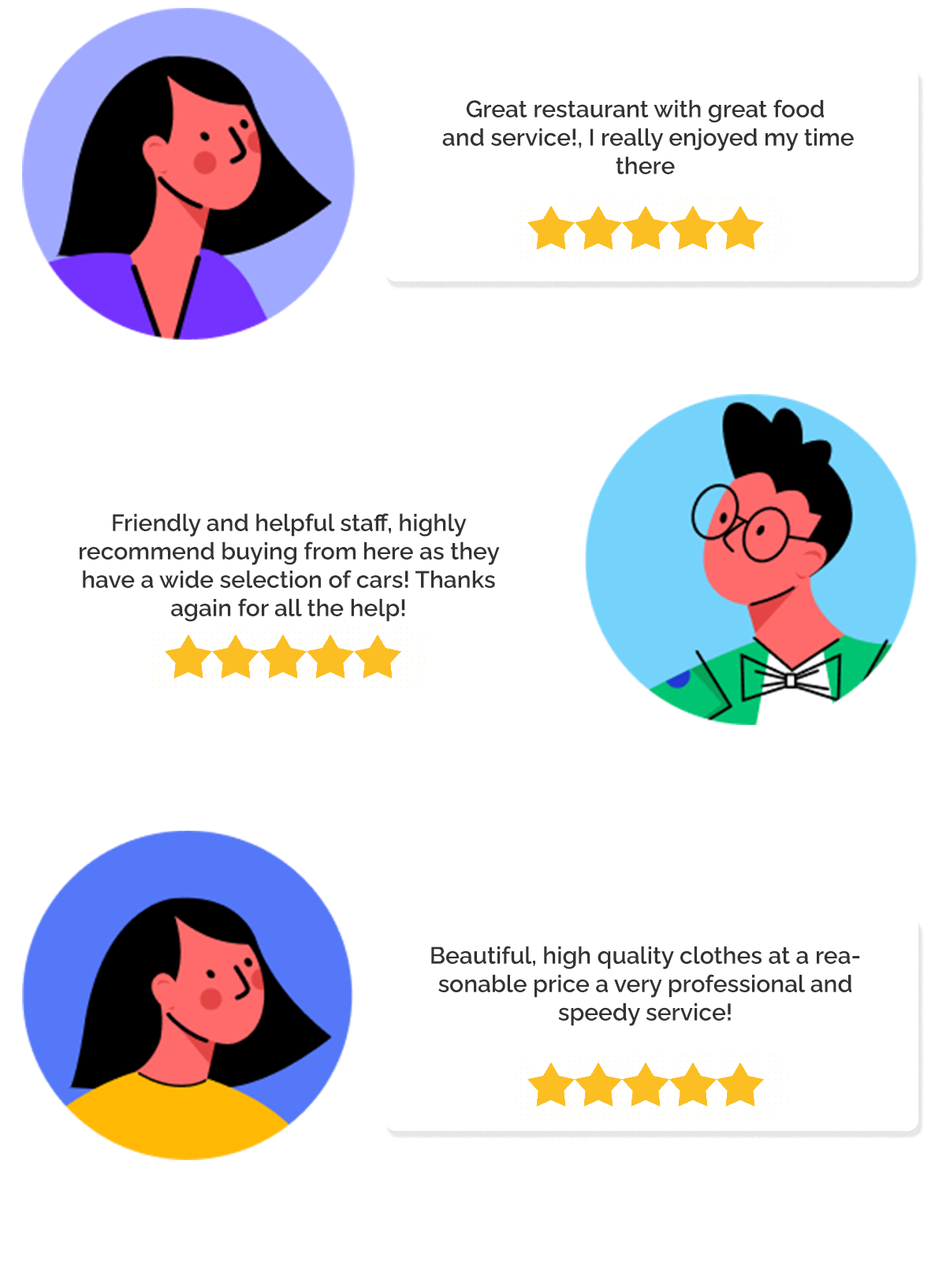
<style>
.page{position:relative;width:946px;height:1261px;background:#ffffff}
.page>*{position:absolute;margin:0}
.t1{font:23.7px "RalewayThin-SemiBold";color:#333333}
.t2{font:23.6px "RalewayThin-SemiBold";color:#333333}
</style>
<div class="page">
<p class="t1" style="left:442px;top:99px;width:411px;height:75px;text-align:center">Great restaurant with great food<br> and service!, I really enjoyed my time there</p>
<p class="t2" style="left:80px;top:513px;width:420px;height:109px;text-align:center">Friendly and helpful staff, highly <br>recommend buying from here as they have a wide selection of cars! Thanks again for all the help!</p>
<p class="t1" style="left:431px;top:946px;width:429px;height:80px;text-align:center">Beautiful, high quality clothes at a reasonable price a very professional and speedy service!</p>
</div>
